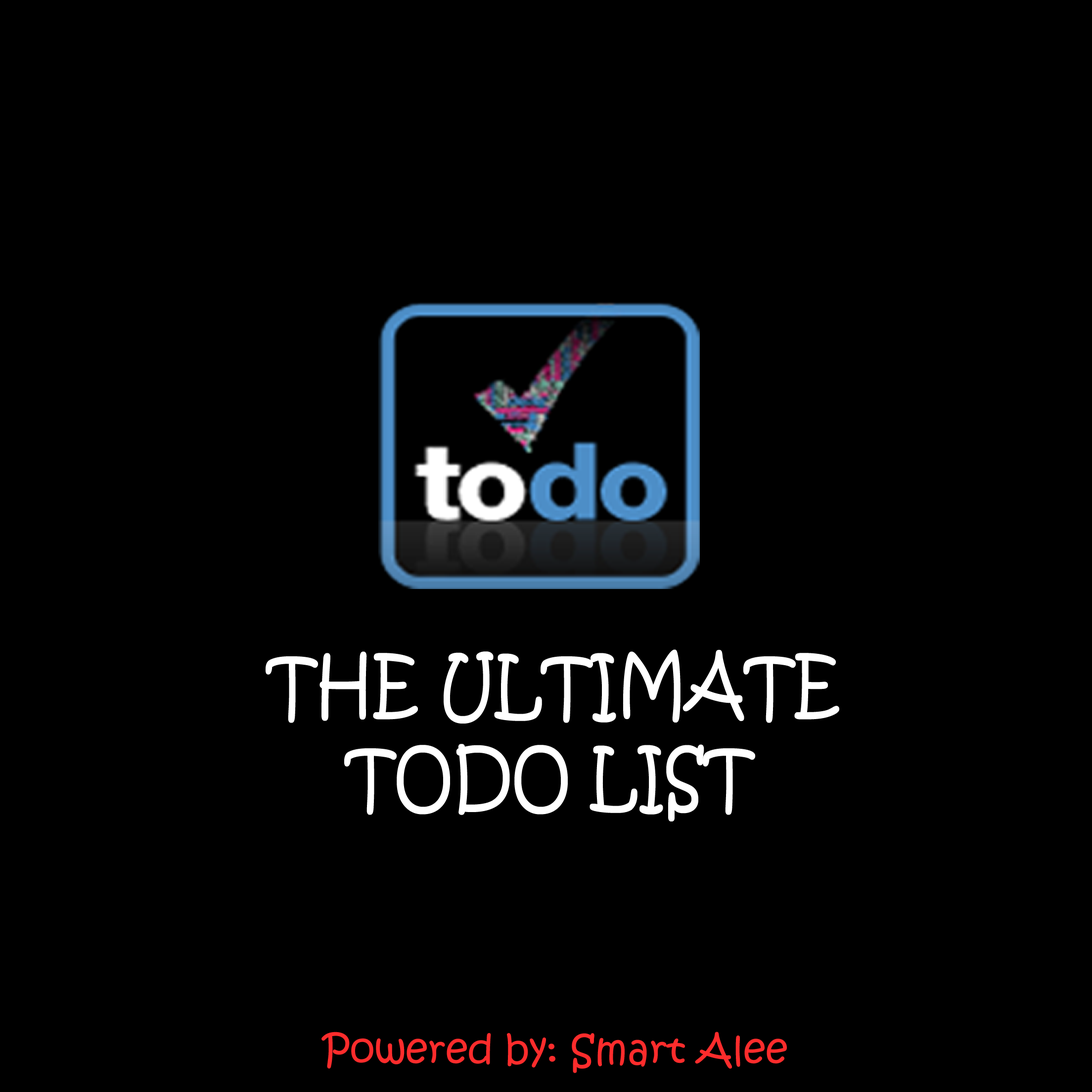
<style>
.page{position:relative;width:1092px;height:1092px;background:#000000}
.page>*{position:absolute;margin:0}
.t1{font:76.7px "KristenITC-Regular";color:#ffffff;scale:0.86 1}
.t2{font:39.6px "KristenITC-Regular";color:#fe2c2c}
</style>
<div class="page">
<p class="t1" style="left:265px;top:649px;width:574px;height:172px">THE ULTIMATE<br>    TODO LIST</p>
<p class="t2" style="left:321px;top:1032px;width:466px;height:41px">Powered by: Smart Alee</p>
</div>
